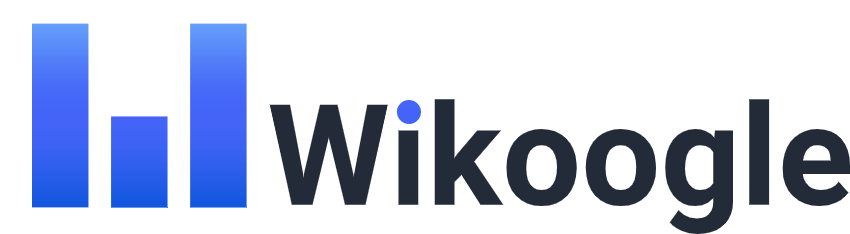
<style>
.page{position:relative;width:850px;height:234px;background:#ffffff}
.page>*{position:absolute;margin:0}
.t1{font:140.6px "Roboto-Bold";color:#222b37}
</style>
<div class="page">
<p class="t1" style="left:269px;top:99px;width:581px;height:135px">Wikoogle</p>
</div>
